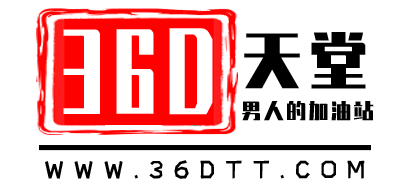
<style>
.page{position:relative;width:410px;height:196px;background:#ffffff}
.page>*{position:absolute;margin:0}
.t1{font:93.9px "ZhenyanGB-Regular";letter-spacing:0.12em;color:#ffffff;scale:0.79 1}
.t2{font:59.4px "ZhenyanGB-Regular";letter-spacing:0.12em;color:#000000}
.t3{font:20.1px "ZhenyanGB-Regular";letter-spacing:0.12em;color:#000000}
.t4{font:24.4px "shetumodengxiaofangti";letter-spacing:0.4em;color:#000000;text-transform:uppercase}
</style>
<div class="page">
<p class="t1" style="left:63px;top:28px;width:150px;height:87px">36D</p>
<p class="t2" style="left:244px;top:32px;width:122px;height:57px">天堂</p>
<p class="t3" style="left:242px;top:101px;width:132px;height:20px">男人的加油站</p>
<p class="t4" style="left:45px;top:160px;width:320px;height:19px">WWW.36DTT.COM</p>
</div>
